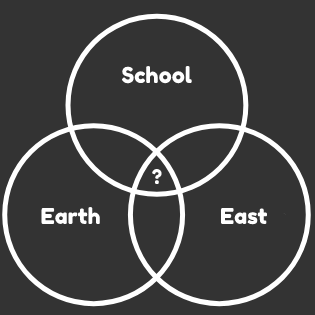
<style>
.page{position:relative;width:315px;height:315px;background:#333333}
.page>*{position:absolute;margin:0}
.t1{font:21.9px "FredokaOne-Regular";color:#ffffff}
</style>
<div class="page">
<p class="t1" style="left:122px;top:66px;width:70px;height:18px">School</p>
<p class="t1" style="left:41px;top:207px;width:59px;height:17px">Earth</p>
<p class="t1" style="left:221px;top:207px;width:46px;height:18px">East</p>
</div>
